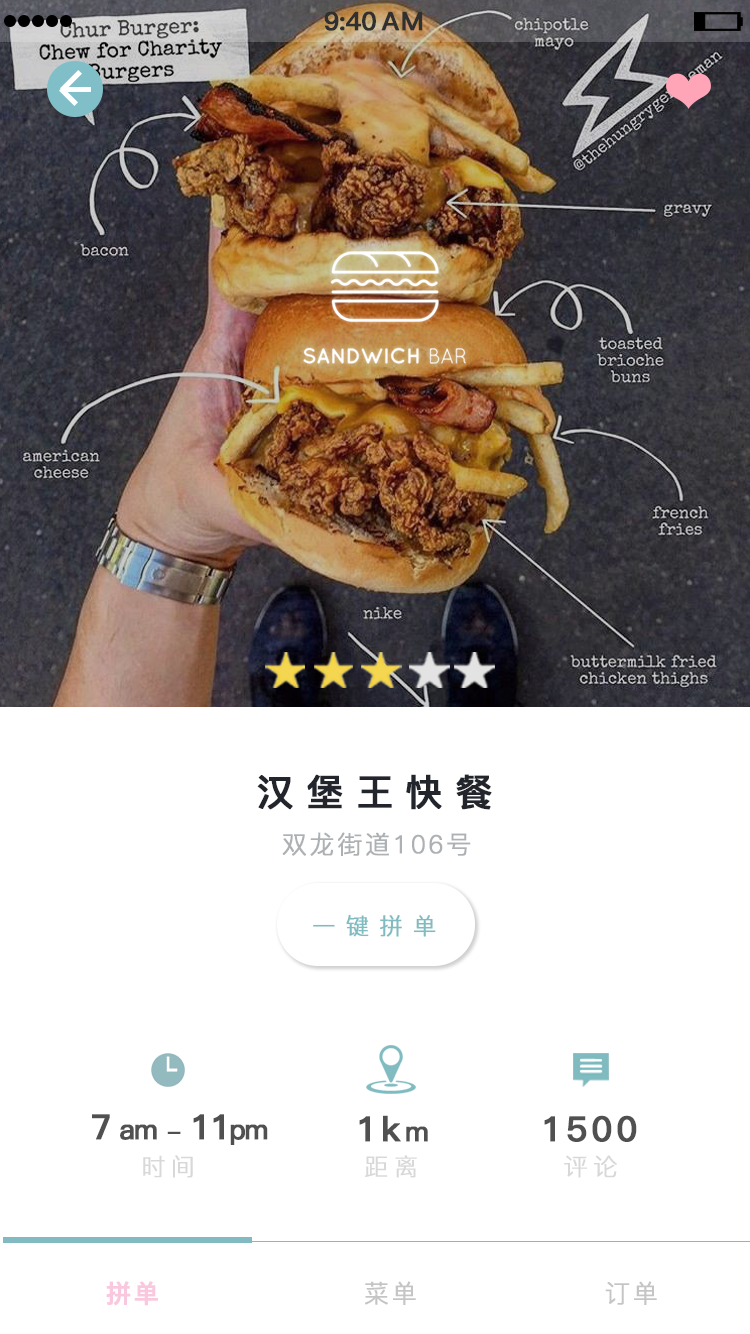
<style>
.page{position:relative;width:750px;height:1334px;background:#ffffff}
.page>*{position:absolute;margin:0}
.t1{font:25.4px "PingFang-SC-Bold";letter-spacing:-0.028em;color:#303030;font-weight:bold}
.t2{font:25.4px "PingFang-SC-Bold";letter-spacing:0.052em;color:#303030;font-weight:bold}
.t3{font:37px "PingFang-SC-Bold";letter-spacing:0.314em;color:#22252b;font-weight:bold}
.t4{font:25px "PingFang-SC-Regular";letter-spacing:0.085em;color:#adb2b4;font-weight:bold}
.t5{font:23px "PingFang-SC-Regular";letter-spacing:0.432em;color:#7fbbc0;font-weight:bold}
.t6{font:27.5px "PingFang-SC-Bold";letter-spacing:-0.068em;color:#515050;font-weight:bold}
.t7{font:34.6px "PingFang-SC-Bold";letter-spacing:-0.068em;color:#515050;font-weight:bold}
.t8{font:24px "PingFang-SC-Bold";letter-spacing:-0.068em;color:#515050;font-weight:bold}
.t9{font:34.6px "PingFang-SC-Bold";letter-spacing:0.092em;color:#515050;font-weight:bold}
.t10{font:27.5px "PingFang-SC-Bold";letter-spacing:0.092em;color:#515050;font-weight:bold}
.t11{font:24px "PingFang-SC-Regular";letter-spacing:0.212em;color:#d8d8d8;font-weight:bold}
.t12{font:25px "PingFang-SC-Bold";letter-spacing:0.085em;color:#f9c8de;font-weight:bold}
.t13{font:25px "PingFang-SC-Regular";letter-spacing:0.085em;color:#c5c5c5;font-weight:bold}
</style>
<div class="page">
<p class="t1" style="left:324px;top:11px;width:52px;height:20px">9:40</p>
<p class="t2" style="left:381px;top:11px;width:42px;height:20px">AM</p>
<p class="t3" style="left:257px;top:774px;width:235px;height:36px">汉堡王快餐</p>
<p class="t4" style="left:282px;top:832px;width:189px;height:24px">双龙街道106号</p>
<p class="t5" style="left:313px;top:914px;width:123px;height:23px">一键拼单</p>
<p class="t6" style="left:92px;top:1114px;width:176px;height:31px"><span class="t7">7 </span>am <span class="t8">-</span><span class="t7"> 11</span>pm</p>
<p class="t9" style="left:359px;top:1115px;width:69px;height:27px">1k<span class="t10">m</span></p>
<p class="t9" style="left:544px;top:1115px;width:93px;height:27px">1500</p>
<p class="t11" style="left:143px;top:1155px;width:50px;height:23px">时间</p>
<p class="t11" style="left:365px;top:1155px;width:52px;height:23px">距离</p>
<p class="t11" style="left:564px;top:1155px;width:53px;height:23px">评论</p>
<p class="t12" style="left:106px;top:1281px;width:52px;height:25px">拼单</p>
<p class="t13" style="left:365px;top:1281px;width:51px;height:24px">菜单</p>
<p class="t13" style="left:605px;top:1281px;width:52px;height:24px">订单</p>
</div>
